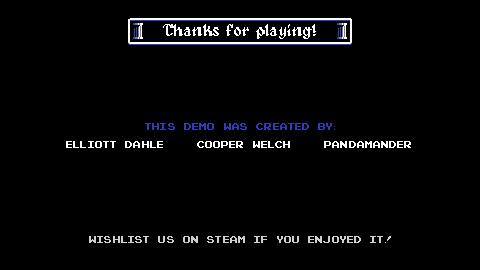
<style>
.page{position:relative;width:480px;height:270px;background:#000000}
.page>*{position:absolute;margin:0}
.t1{font:16.7px "Alagard";color:#ffffff}
.t2{font:10.4px "PixelEmulator";color:#303fb8}
.t3{font:10.4px "PixelEmulator";color:#ffffff}
.t4{font:10.4px "PixelEmulator";color:#d0d0d0}
</style>
<div class="page">
<p class="t1" style="left:163px;top:24px;width:153px;height:15px">Thanks for playing!</p>
<p class="t2" style="left:145px;top:123px;width:190px;height:7px">this demo was created by:</p>
<p class="t3" style="left:66px;top:141px;width:345px;height:7px">Elliott Dahle    Cooper Welch    pandamander</p>
<p class="t4" style="left:89px;top:236px;width:302px;height:7px">wishlist us on steam if you enjoyed it!</p>
</div>
